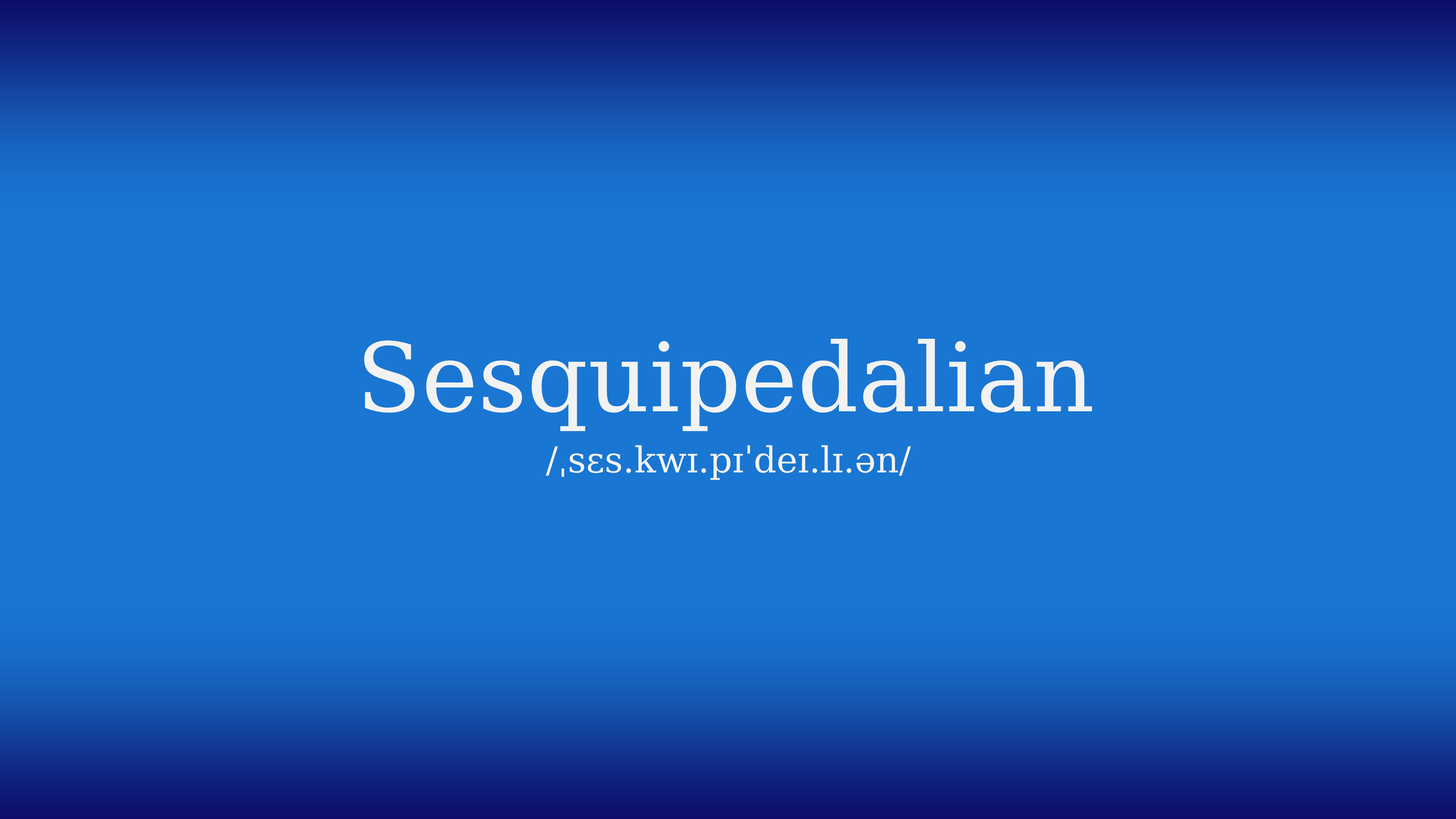
<style>
.page{position:relative;width:1456px;height:819px;background:#1976d2}
.page>*{position:absolute;margin:0}
.t1{font:95.4px "DejaVuSerif";color:#f2f2f2}
.t2{font:35.8px "DejaVuSerif";color:#f2f2f2}
</style>
<div class="page">
<p class="t1" style="left:364px;top:339px;width:728px;height:92px">Sesquipedalian</p>
<p class="t2" style="left:546px;top:445px;width:365px;height:35px">/ˌsɛs.kwɪ.pɪˈdeɪ.lɪ.ən/</p>
</div>
